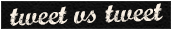
<style>
.page{position:relative;width:172px;height:30px}
.page>*{position:absolute;margin:0}
.t1{font:28.6px "MarcelleScript";color:#faf1e5}
</style>
<div class="page">
<p class="t1" style="left:10px;top:3px;width:153px;height:23px;rotate:-2deg">tweet vs tweet</p>
</div>
